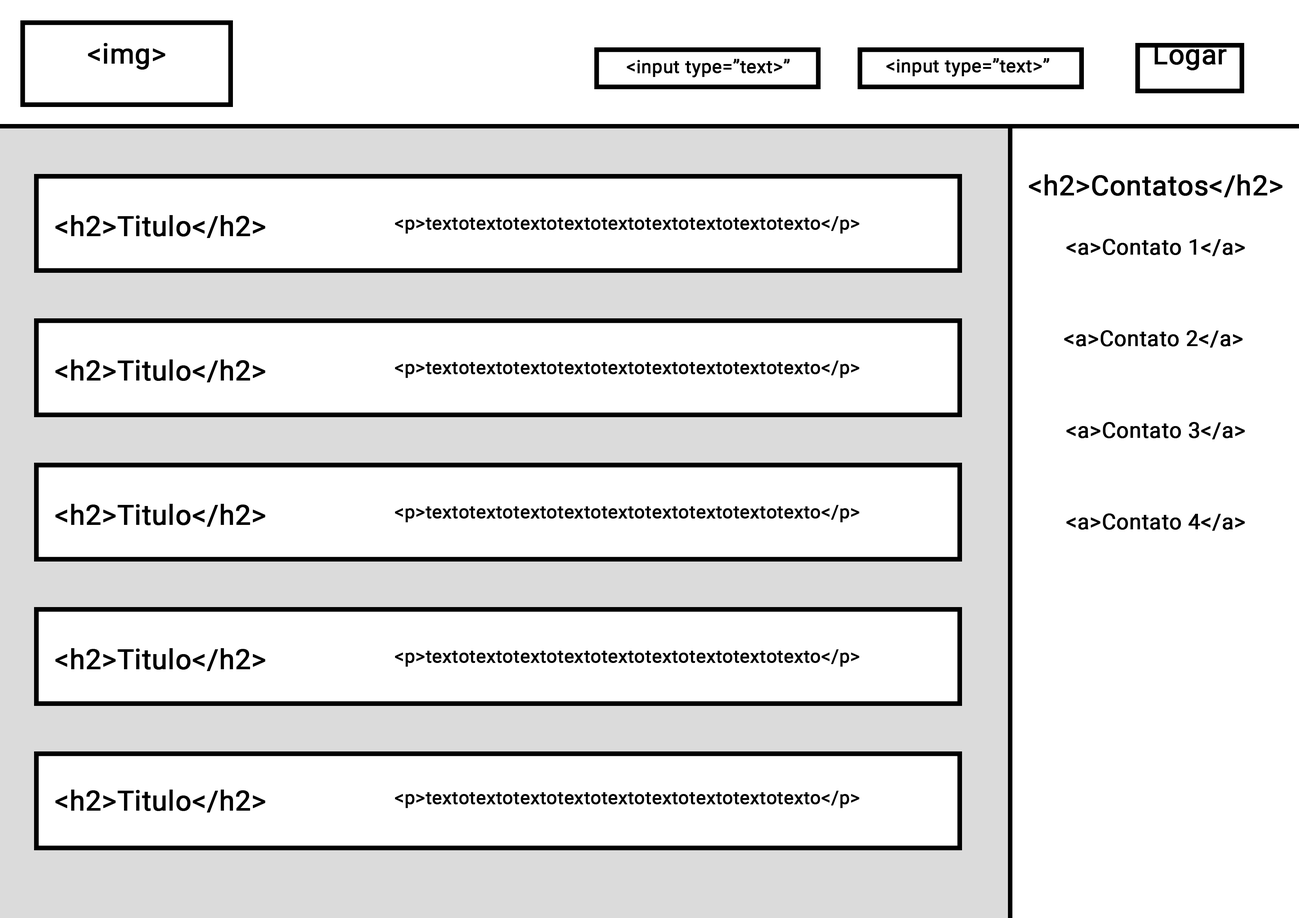
<style>
.page{position:relative;width:1299px;height:918px;background:#ffffff}
.page>*{position:absolute;margin:0}
.t1{font:27.8px "Roboto-Regular";color:#000000;font-weight:bold}
.t2{font:18.5px "Roboto-Regular";color:#000000;font-weight:bold}
.t3{font:21.6px "Roboto-Regular";color:#000000;font-weight:bold}
</style>
<div class="page">
<p class="t1" style="left:88px;top:43px;width:77px;height:27px">&lt;img&gt;</p>
<p class="t1" style="left:1154px;top:44px;width:73px;height:26px">Logar</p>
<p class="t2" style="left:626px;top:59px;width:164px;height:18px">&lt;input type=”text&gt;”</p>
<p class="t2" style="left:886px;top:58px;width:163px;height:19px">&lt;input type=”text&gt;”</p>
<p class="t1" style="left:1028px;top:174px;width:254px;height:23px">&lt;h2&gt;Contatos&lt;/h2&gt;</p>
<p class="t1" style="left:55px;top:215px;width:210px;height:23px">&lt;h2&gt;Titulo&lt;/h2&gt;</p>
<p class="t2" style="left:395px;top:216px;width:464px;height:18px">&lt;p&gt;textotextotextotextotextotextotextotextotexto&lt;/p&gt;</p>
<p class="t3" style="left:1066px;top:239px;width:179px;height:17px">&lt;a&gt;Contato 1&lt;/a&gt;</p>
<p class="t3" style="left:1064px;top:330px;width:178px;height:18px">&lt;a&gt;Contato 2&lt;/a&gt;</p>
<p class="t1" style="left:55px;top:359px;width:210px;height:23px">&lt;h2&gt;Titulo&lt;/h2&gt;</p>
<p class="t2" style="left:395px;top:361px;width:464px;height:17px">&lt;p&gt;textotextotextotextotextotextotextotextotexto&lt;/p&gt;</p>
<p class="t3" style="left:1066px;top:422px;width:179px;height:17px">&lt;a&gt;Contato 3&lt;/a&gt;</p>
<p class="t1" style="left:55px;top:504px;width:210px;height:23px">&lt;h2&gt;Titulo&lt;/h2&gt;</p>
<p class="t2" style="left:395px;top:505px;width:464px;height:17px">&lt;p&gt;textotextotextotextotextotextotextotextotexto&lt;/p&gt;</p>
<p class="t3" style="left:1066px;top:513px;width:179px;height:18px">&lt;a&gt;Contato 4&lt;/a&gt;</p>
<p class="t1" style="left:55px;top:648px;width:210px;height:23px">&lt;h2&gt;Titulo&lt;/h2&gt;</p>
<p class="t2" style="left:395px;top:649px;width:464px;height:18px">&lt;p&gt;textotextotextotextotextotextotextotextotexto&lt;/p&gt;</p>
<p class="t1" style="left:55px;top:790px;width:210px;height:23px">&lt;h2&gt;Titulo&lt;/h2&gt;</p>
<p class="t2" style="left:395px;top:791px;width:464px;height:17px">&lt;p&gt;textotextotextotextotextotextotextotextotexto&lt;/p&gt;</p>
</div>
